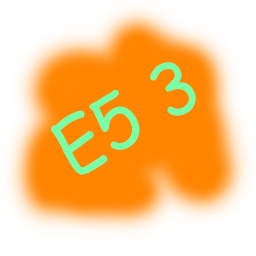
<style>
.page{position:relative;width:256px;height:256px;background:#ffffff}
.page>*{position:absolute;margin:0}
.t1{font:72px "ComicSansMS";color:#7bffa6}
</style>
<div class="page">
<p class="t1" style="left:51px;top:62px;width:145px;height:113px;rotate:-30deg">E5 3</p>
</div>
